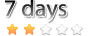
<style>
.page{position:relative;width:91px;height:36px;background:#ffffff}
.page>*{position:absolute;margin:0}
.t1{font:24px "MyriadPro-Regular"}
</style>
<div class="page">
<p class="t1" style="left:5px;top:0px;width:62px;height:22px">7 days</p>
</div>
